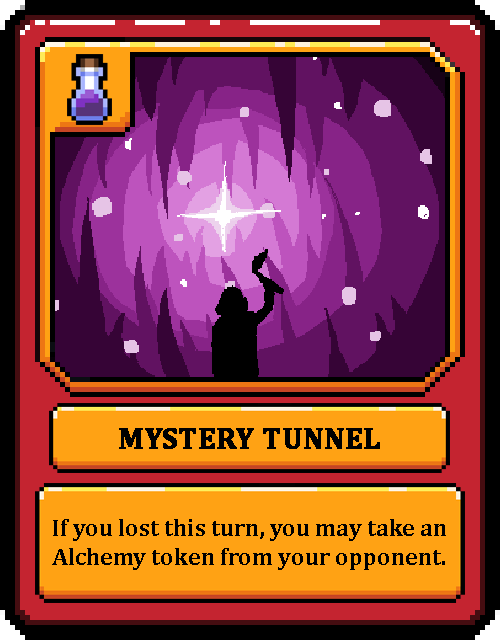
<style>
.page{position:relative;width:500px;height:640px;background:#000000}
.page>*{position:absolute;margin:0}
.t1{font:30px "Cambria-Bold";color:#000000;text-transform:uppercase;font-weight:bold}
.t2{font:24px "Cambria-Bold";color:#000000}
</style>
<div class="page">
<p class="t1" style="left:119px;top:428px;width:261px;height:21px">Mystery Tunnel</p>
<p class="t2" style="left:52px;top:519px;width:394px;height:51px;text-align:center">If you lost this turn, you may take an Alchemy token from your opponent.</p>
</div>
